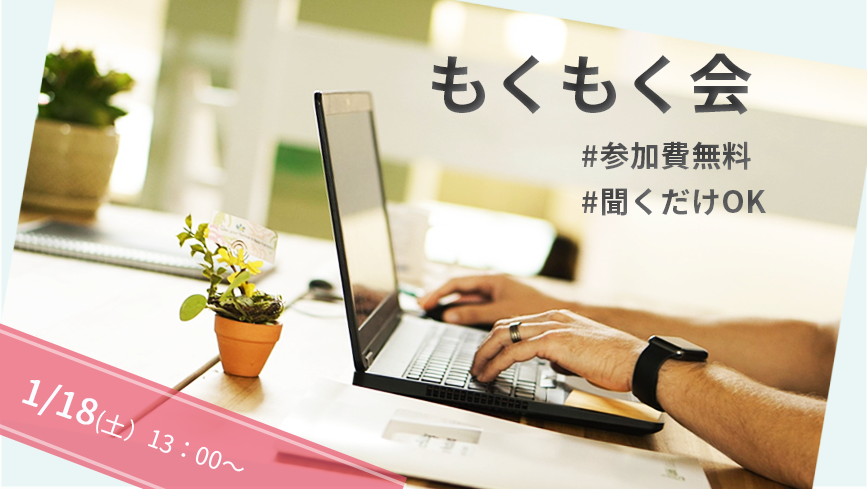
<style>
.page{position:relative;width:867px;height:489px}
.page>*{position:absolute;margin:0}
.t1{font:65px "SourceHanSans-Bold";letter-spacing:0.007em;color:#444445}
.t2{font:30px "SourceHanSans-Bold";letter-spacing:0.02em;color:#4f5051}
.t3{font:30px "SourceHanSans-Bold";letter-spacing:0.02em;color:#58595a}
.t4{font:24px "SourceHanSans-Regular";color:#fbfcff}
.t5{font:36px "SourceHanSans-Regular";color:#fbfcff;font-weight:bold}
.t6{font:34px "SourceHanSans-Regular";color:#fbfcff}
</style>
<div class="page">
<p class="t1" style="left:432px;top:53px;width:320px;height:62px">もくもく会</p>
<p class="t2" style="left:582px;top:141px;width:169px;height:29px">#参加費無料</p>
<p class="t3" style="left:582px;top:188px;width:184px;height:28px">#聞くだけOK</p>
<p class="t4" style="left:22px;top:380px;width:222px;height:92px;text-align:center;rotate:19deg"><span class="t5">1/18</span>(土）13：00～<br><span class="t6">)</span></p>
</div>
